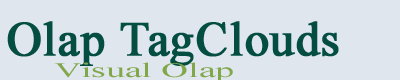
<style>
.page{position:relative;width:400px;height:80px;background:#dfe6ee}
.page>*{position:absolute;margin:0}
.t1{font:48.6px "TimesNewRomanPSMT";color:#044e41;font-weight:bold}
.t2{font:20.8px "TimesNewRomanPSMT";color:#82a74a;scale:1.8 1}
</style>
<div class="page">
<p class="t1" style="left:7px;top:21px;width:332px;height:45px">Olap TagClouds</p>
<p class="t2" style="left:54px;top:62px;width:179px;height:20px">Visual Olap</p>
</div>
